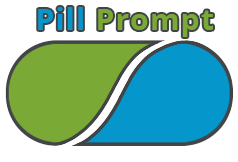
<style>
.page{position:relative;width:238px;height:162px;background:#ffffff}
.page>*{position:absolute;margin:0}
.t1{font:30px "OpenSans-Bold";letter-spacing:0.04em;color:#7aa936}
.t2{font:30px "OpenSans-Bold";letter-spacing:0.04em;color:#0596cc}
</style>
<div class="page">
<p class="t1" style="left:38px;top:7px;width:175px;height:30px"><span class="t2">Pill</span> Prompt</p>
</div>
